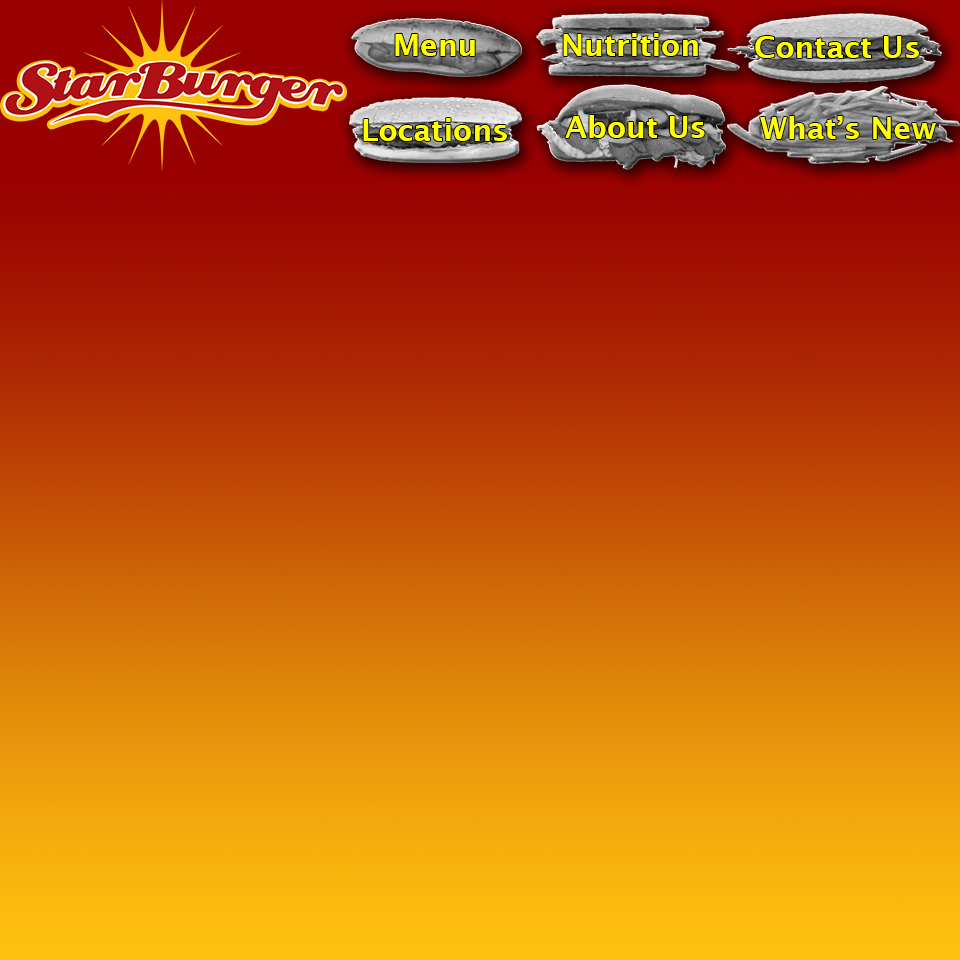
<style>
.page{position:relative;width:960px;height:960px}
.page>*{position:absolute;margin:0}
.t1{font:30px "LucidaSans-Demi";color:#ffff00}
</style>
<div class="page">
<p class="t1" style="left:395px;top:34px;width:80px;height:22px">Menu</p>
<p class="t1" style="left:563px;top:33px;width:135px;height:23px">Nutrition</p>
<p class="t1" style="left:755px;top:36px;width:164px;height:22px">Contact Us</p>
<p class="t1" style="left:363px;top:118px;width:144px;height:23px">Locations</p>
<p class="t1" style="left:565px;top:115px;width:140px;height:23px">About Us</p>
<p class="t1" style="left:760px;top:116px;width:176px;height:23px">What’s New</p>
</div>
